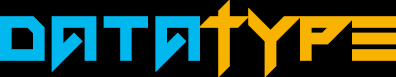
<style>
.page{position:relative;width:396px;height:77px;background:#000000}
.page>*{position:absolute;margin:0}
.t1{font:88px "Vermin-Vibes";color:#00b8ee;font-weight:bold}
.t2{font:88px "Vermin-Vibes";color:#f8b300;font-weight:bold}
</style>
<div class="page">
<p class="t1" style="left:0px;top:0px;width:397px;height:78px">Data<span class="t2">Type</span></p>
</div>
